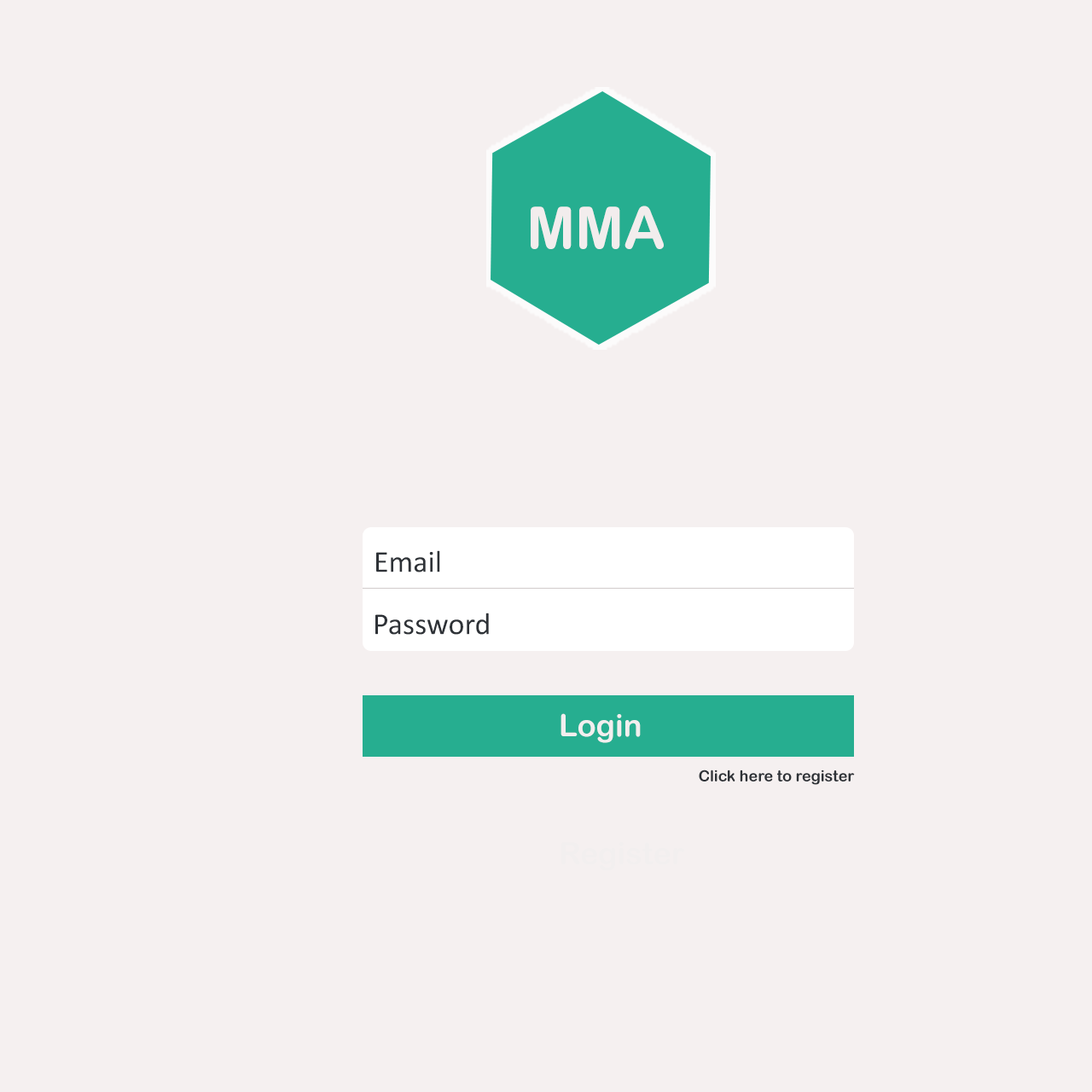
<style>
.page{position:relative;width:1092px;height:1092px;background:#f5f0f0}
.page>*{position:absolute;margin:0}
.t1{font:58.4px "ArialRoundedMTBold";color:#f2eded}
.t2{font:30.7px "Calibri";color:#2e3237}
.t3{font:30.7px "ArialRoundedMTBold";color:#f2efef}
.t4{font:15.4px "ArialRoundedMTBold";color:#2e3237}
</style>
<div class="page">
<p class="t1" style="left:531px;top:206px;width:133px;height:43px">MMA</p>
<p class="t2" style="left:376px;top:550px;width:64px;height:22px">Email</p>
<p class="t2" style="left:375px;top:613px;width:114px;height:22px">Password</p>
<p class="t3" style="left:560px;top:713px;width:81px;height:30px">Login</p>
<p class="t4" style="left:699px;top:770px;width:156px;height:15px">Click here to register</p>
</div>
